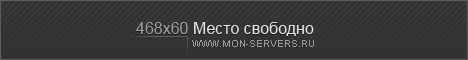
<style>
.page{position:relative;width:468px;height:60px;background:#323232}
.page>*{position:absolute;margin:0}
.t1{font:16px "ArialMT";color:#e1e1e1}
.t2{font:16px "ArialMT";color:#9b9b9b}
.t3{font:10px "ArialMT";color:#999999}
</style>
<div class="page">
<p class="t1" style="left:136px;top:22px;width:178px;height:14px"><span class="t2">468x60 </span>Место свободно</p>
<p class="t3" style="left:192px;top:40px;width:122px;height:7px">WWW.MON-SERVERS.RU</p>
</div>
